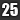
<style>
.page{position:relative;width:20px;height:20px;background:#fbfbfb}
.page>*{position:absolute;margin:0}
.t1{font:16px "Impact";color:#fbfbfb}
</style>
<div class="page">
<p class="t1" style="left:2px;top:3px;width:16px;height:13px">25</p>
</div>
